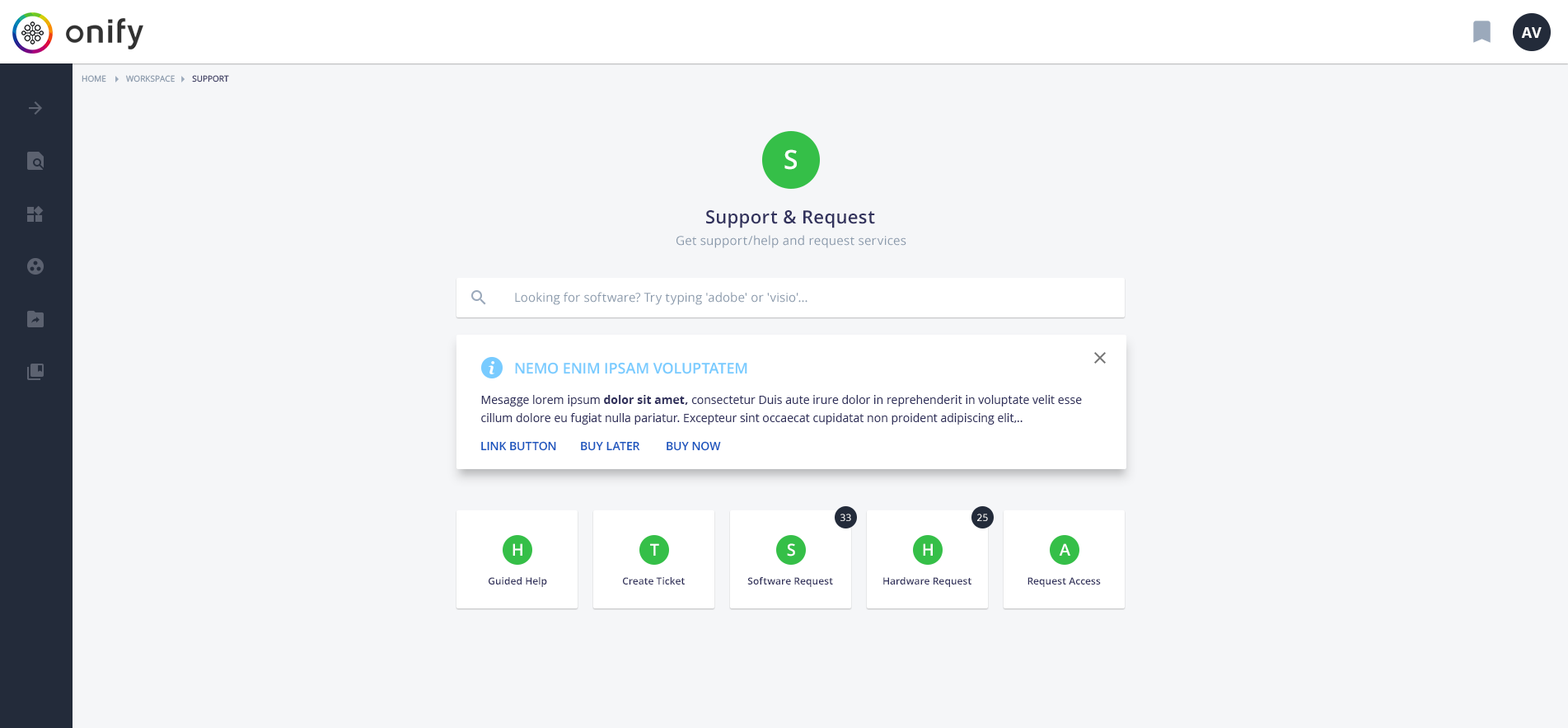
<style>
.page{position:relative;width:1568px;height:728px;background:#f5f6f8}
.page>*{position:absolute;margin:0}
.t1{font:14.8px "OpenSans-Bold";color:#ffffff;text-transform:uppercase}
.t2{font:8.2px "OpenSans";color:#8898aa;text-transform:uppercase}
.t3{font:8.2px "OpenSans";color:#32325d;text-transform:uppercase}
.t4{font:26.4px "OpenSans-Semibold";letter-spacing:0.005em;color:#ffffff}
.t5{font:18.1px "OpenSans-Semibold";letter-spacing:0.02em;color:#32325d}
.t6{font:12.4px "OpenSans";letter-spacing:0.02em;color:#8898aa}
.t7{font:12.4px "OpenSans";letter-spacing:0.01em;color:#8898aa}
.t8{font:14.8px "OpenSans-Semibold";color:#78cbff;text-transform:uppercase}
.t9{font:11.5px/18.1px "OpenSans";letter-spacing:0.005em;color:#32325d}
.t10{font:11.5px/18.1px "OpenSans-Bold";letter-spacing:0.005em;color:#32325d}
.t11{font:11.5px "OpenSans-Semibold";color:#1754be}
.t12{font:9.9px "OpenSans";letter-spacing:0.005em;color:#ffffff}
.t13{font:16.5px "OpenSans-Semibold";letter-spacing:0.005em;color:#ffffff}
.t14{font:9.9px "OpenSans-Semibold";letter-spacing:0.005em;color:#32325d}
</style>
<div class="page">
<p class="t1" style="left:1521px;top:27px;width:21px;height:11px">AV</p>
<p class="t2" style="left:82px;top:75px;width:24px;height:7px">Home</p>
<p class="t2" style="left:126px;top:75px;width:49px;height:7px">Workspace</p>
<p class="t3" style="left:192px;top:75px;width:37px;height:7px">support</p>
<p class="t4" style="left:784px;top:149px;width:13px;height:21px">S</p>
<p class="t5" style="left:706px;top:210px;width:169px;height:18px">Support &amp; Request</p>
<p class="t6" style="left:676px;top:235px;width:230px;height:13px">Get support/help and request services</p>
<p class="t7" style="left:515px;top:292px;width:292px;height:13px">Looking for software? Try typing 'adobe' or 'visio'...</p>
<p class="t8" style="left:515px;top:362px;width:232px;height:12px">Nemo enim ipsam voluptatem</p>
<p class="t9" style="left:481px;top:395px;width:601px;height:29px">Mesagge lorem ipsum<span class="t10"> dolor sit amet,</span> consectetur Duis aute irure dolor in reprehenderit in voluptate velit esse <br>cillum dolore eu fugiat nulla pariatur. Excepteur sint occaecat cupidatat non proident adipiscing elit,..</p>
<p class="t11" style="left:481px;top:441px;width:75px;height:10px">LINK BUTTON</p>
<p class="t11" style="left:581px;top:441px;width:59px;height:10px">BUY LATER</p>
<p class="t11" style="left:667px;top:441px;width:54px;height:10px">BUY NOW</p>
<p class="t12" style="left:840px;top:513px;width:11px;height:8px">33</p>
<p class="t12" style="left:977px;top:513px;width:11px;height:8px">25</p>
<p class="t13" style="left:513px;top:543px;width:9px;height:12px">H</p>
<p class="t13" style="left:650px;top:543px;width:9px;height:12px">T</p>
<p class="t13" style="left:787px;top:543px;width:8px;height:13px">S</p>
<p class="t13" style="left:923px;top:543px;width:10px;height:12px">H</p>
<p class="t13" style="left:1059px;top:543px;width:11px;height:12px">A</p>
<p class="t14" style="left:489px;top:577px;width:58px;height:10px">Guided Help</p>
<p class="t14" style="left:623px;top:577px;width:62px;height:7px">Create Ticket</p>
<p class="t14" style="left:747px;top:577px;width:86px;height:10px">Software Request</p>
<p class="t14" style="left:883px;top:577px;width:88px;height:10px">Hardware Request</p>
<p class="t14" style="left:1027px;top:577px;width:74px;height:10px">Request Access</p>
</div>
